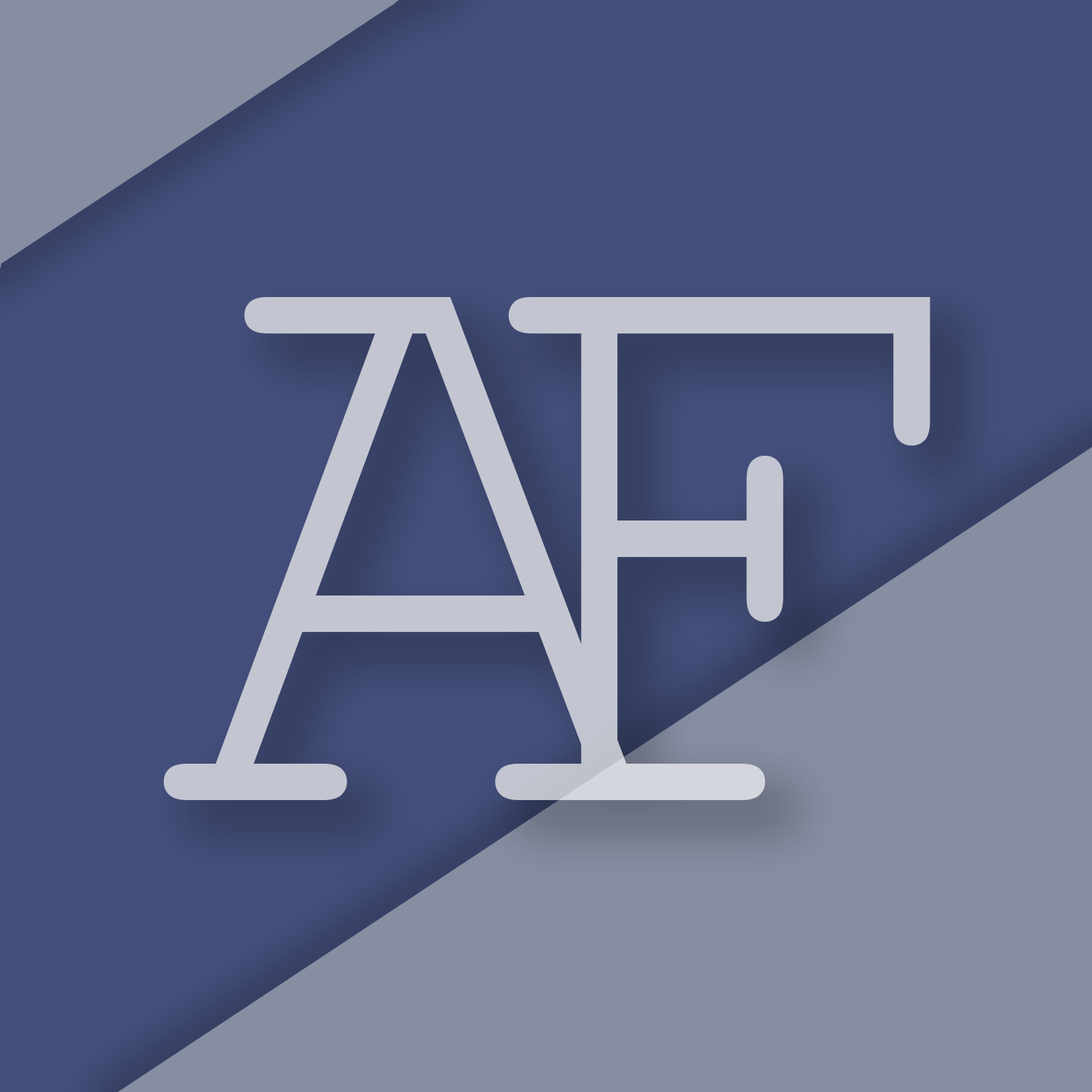
<style>
.page{position:relative;width:1092px;height:1092px;background:#44507c}
.page>*{position:absolute;margin:0}
.t1{font:879.7px "CourierNewPSMT";letter-spacing:0.003em;color:#c3c5d1;text-transform:uppercase}
</style>
<div class="page">
<p class="t1" style="left:163px;top:297px;width:767px;height:503px">AF</p>
</div>
